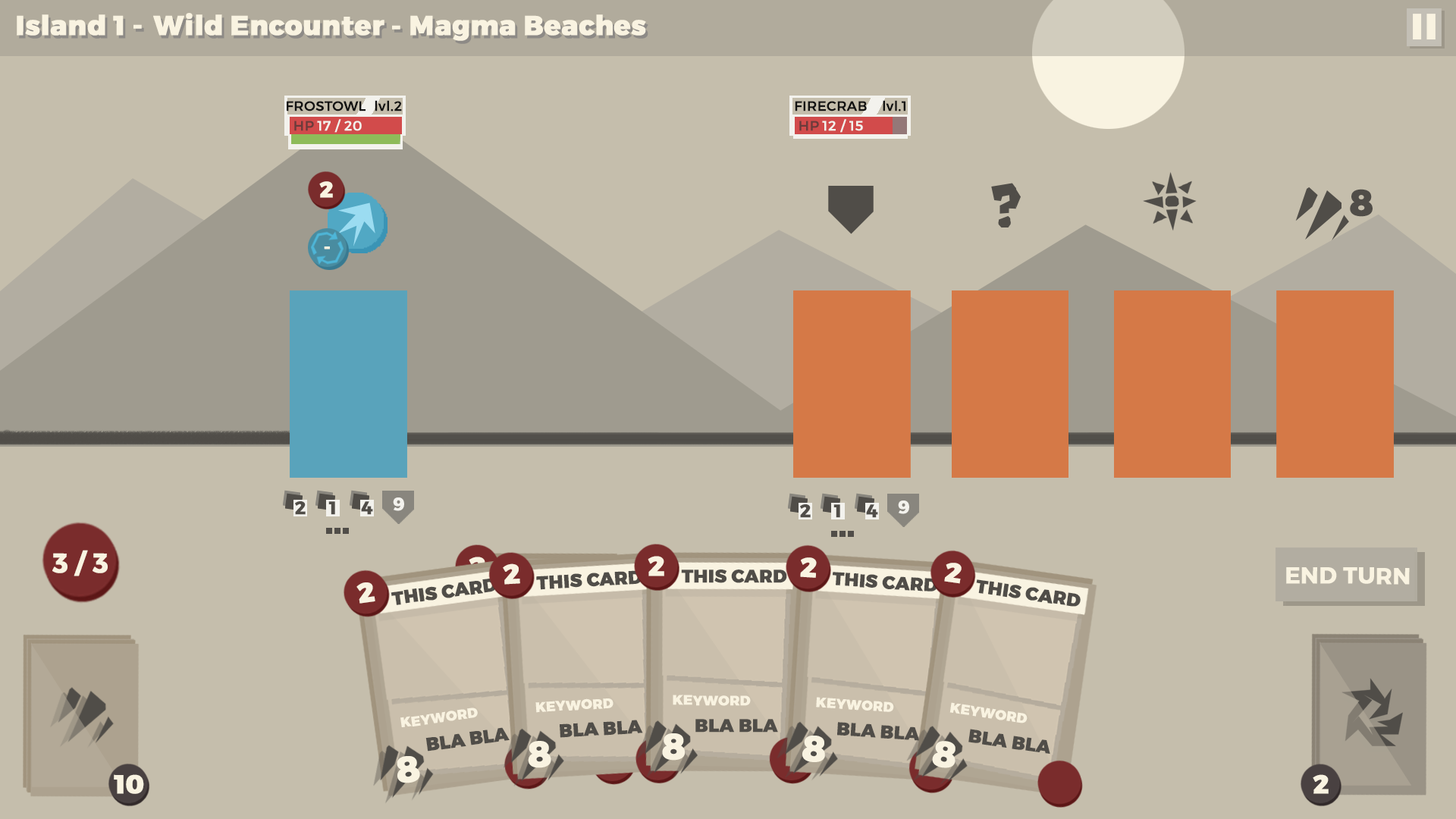
<style>
.page{position:relative;width:1456px;height:819px;background:#c5beac}
.page>*{position:absolute;margin:0}
.t1{font:27.3px "Montserrat-ExtraBold";color:#f9f3e1;font-weight:bold}
.t2{font:13.6px "Montserrat-Regular";color:#121212;font-weight:bold}
.t3{font:13.6px "Montserrat-Regular";color:#6b3b3b;font-weight:bold}
.t4{font:13.6px "Montserrat-Regular";color:#f3f2ed;font-weight:bold}
.t5{font:22.2px "Montserrat-ExtraBold";color:#f9f3e1;font-weight:bold}
.t6{font:36.4px "Montserrat-ExtraBold";color:#504d48;font-weight:bold}
.t7{font:18.2px "Montserrat-ExtraBold";color:#f9f3e1;font-weight:bold}
.t8{font:18.2px "Montserrat-Bold";color:#f3f2ed;font-weight:bold}
.t9{font:18.2px "Montserrat-Bold";color:#504d48;font-weight:bold}
.t10{font:27.3px "Montserrat-Bold";color:#f9f3e1;font-weight:bold}
.t11{font:27.3px "Montserrat-ExtraBold";font-weight:bold}
.t12{font:18.2px "Montserrat-ExtraBold";color:#504d48;font-weight:bold}
.t13{font:22.7px "Montserrat-SemiBold";color:#f9f3e1;font-weight:bold}
.t14{font:13.6px "Montserrat-ExtraBold";color:#f9f3e1;font-weight:bold}
.t15{font:36.4px "Montserrat-ExtraBold";color:#f9f3e1;font-weight:bold}
.t16{font:26.1px "Montserrat-ExtraBold";color:#f9f3e1;font-weight:bold}
.t17{font:26px "Montserrat-ExtraBold";color:#f9f3e1;font-weight:bold}
</style>
<div class="page">
<p class="t1" style="left:17px;top:14px;width:125px;height:22px">Island 1 -</p>
<p class="t1" style="left:153px;top:13px;width:247px;height:23px">Wild Encounter -</p>
<p class="t1" style="left:410px;top:14px;width:236px;height:27px">Magma Beaches</p>
<p class="t2" style="left:287px;top:101px;width:79px;height:10px">FROSTOWL</p>
<p class="t2" style="left:375px;top:100px;width:27px;height:11px">lvl.2</p>
<p class="t2" style="left:795px;top:101px;width:72px;height:10px">FIRECRAB</p>
<p class="t2" style="left:883px;top:100px;width:22px;height:11px">lvl.1</p>
<p class="t3" style="left:294px;top:121px;width:20px;height:10px">HP</p>
<p class="t4" style="left:317px;top:119px;width:45px;height:14px">17 / 20</p>
<p class="t3" style="left:799px;top:121px;width:20px;height:10px">HP</p>
<p class="t4" style="left:822px;top:119px;width:41px;height:14px">12 / 15</p>
<p class="t5" style="left:319px;top:181px;width:14px;height:17px">2</p>
<p class="t6" style="left:1350px;top:189px;width:23px;height:28px">8</p>
<p class="t7" style="left:324px;top:246px;width:6px;height:3px">-</p>
<p class="t8" style="left:393px;top:497px;width:11px;height:14px">9</p>
<p class="t9" style="left:295px;top:501px;width:11px;height:14px">2</p>
<p class="t9" style="left:328px;top:501px;width:7px;height:14px">1</p>
<p class="t9" style="left:361px;top:501px;width:12px;height:14px">4</p>
<p class="t9" style="left:800px;top:504px;width:11px;height:14px">2</p>
<p class="t9" style="left:833px;top:504px;width:7px;height:14px">1</p>
<p class="t9" style="left:866px;top:504px;width:12px;height:14px">4</p>
<p class="t8" style="left:898px;top:500px;width:11px;height:14px">9</p>
<p class="t10" style="left:52px;top:550px;width:56px;height:26px">3 / 3</p>
<p class="t11" style="left:469px;top:557px;width:16px;height:20px">2</p>
<p class="t1" style="left:648px;top:556px;width:16px;height:20px">2</p>
<p class="t1" style="left:800px;top:557px;width:17px;height:21px;rotate:4deg">2</p>
<p class="t1" style="left:503px;top:563px;width:17px;height:22px;rotate:-3deg">2</p>
<p class="t12" style="left:681px;top:570px;width:106px;height:13px">THIS CARD</p>
<p class="t1" style="left:944px;top:563px;width:18px;height:21px;rotate:8deg">2</p>
<p class="t13" style="left:1286px;top:567px;width:124px;height:18px">END TURN</p>
<p class="t12" style="left:391px;top:579px;width:106px;height:26px;rotate:-8deg">THIS CARD</p>
<p class="t12" style="left:536px;top:570px;width:106px;height:20px;rotate:-3deg">THIS CARD</p>
<p class="t12" style="left:833px;top:572px;width:105px;height:19px;rotate:4deg">THIS CARD</p>
<p class="t12" style="left:976px;top:579px;width:105px;height:28px;rotate:8deg">THIS CARD</p>
<p class="t1" style="left:356px;top:582px;width:19px;height:22px;rotate:-8deg">2</p>
<p class="t14" style="left:535px;top:698px;width:78px;height:15px;rotate:-3deg">KEYWORD</p>
<p class="t14" style="left:673px;top:695px;width:78px;height:11px">KEYWORD</p>
<p class="t14" style="left:816px;top:697px;width:78px;height:15px;rotate:4deg">KEYWORD</p>
<p class="t14" style="left:400px;top:708px;width:78px;height:19px;rotate:-8deg">KEYWORD</p>
<p class="t14" style="left:949px;top:702px;width:79px;height:21px;rotate:8deg">KEYWORD</p>
<p class="t12" style="left:560px;top:720px;width:83px;height:18px;rotate:-3deg">BLA BLA</p>
<p class="t12" style="left:695px;top:719px;width:83px;height:14px">BLA BLA</p>
<p class="t12" style="left:837px;top:722px;width:83px;height:19px;rotate:4deg">BLA BLA</p>
<p class="t12" style="left:425px;top:727px;width:85px;height:24px;rotate:-8deg">BLA BLA</p>
<p class="t15" style="left:662px;top:733px;width:23px;height:28px">8</p>
<p class="t15" style="left:802px;top:736px;width:23px;height:26px;rotate:4deg">8</p>
<p class="t12" style="left:968px;top:729px;width:82px;height:25px;rotate:8deg">BLA BLA</p>
<p class="t15" style="left:528px;top:741px;width:23px;height:27px;rotate:-3deg">8</p>
<p class="t15" style="left:932px;top:741px;width:23px;height:27px;rotate:8deg">8</p>
<p class="t15" style="left:397px;top:756px;width:23px;height:27px;rotate:-8deg">8</p>
<p class="t16" style="left:114px;top:774px;width:30px;height:20px">10</p>
<p class="t17" style="left:1313px;top:774px;width:16px;height:20px">2</p>
</div>
